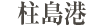
<style>
.page{position:relative;width:105px;height:27px;background:#ffffff}
.page>*{position:absolute;margin:0}
.t1{font:26px "RyuminPr6N-ExBold";color:#4c4843;scale:0.9 1}
</style>
<div class="page">
<p class="t1" style="left:17px;top:1px;width:70px;height:25px">柱島港</p>
</div>
